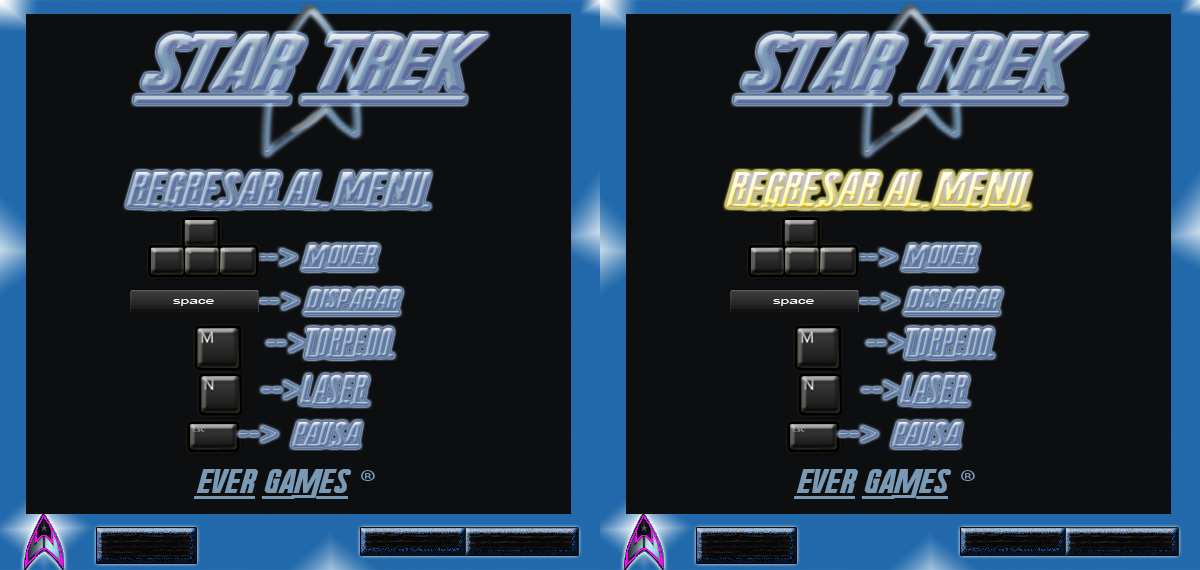
<style>
.page{position:relative;width:1200px;height:570px;background:#0d0e0f}
.page>*{position:absolute;margin:0}
.t1{font:79.1px "RadiumCorp";scale:1.34 1}
.t2{font:40.7px "RadiumCorp";scale:1.23 1}
.t3{font:28.4px "RadiumCorp";scale:1.23 1}
.t4{font:28.4px "MyriadPro-Regular";scale:1.23 1}
.t5{font:9.2px "ArialMT";color:#fafcfe;scale:1.69 1}
.t6{font:33.4px "RadiumCorp"}
.t7{font:33.4px "MyriadPro-Regular"}
.t8{font:34.3px "RadiumCorp"}
.t9{font:34.3px "MyriadPro-Regular"}
.t10{font:33.1px "RadiumCorp";color:#7a99b4;scale:1.25 1}
.t11{font:33.1px "MyriadPro-Regular";color:#7a99b4;scale:1.25 1}
</style>
<div class="page">
<p class="t1" style="left:134px;top:34px;width:354px;height:70px">star trek</p>
<p class="t1" style="left:734px;top:34px;width:354px;height:70px">star trek</p>
<p class="t2" style="left:126px;top:172px;width:305px;height:36px">REGRESAR AL MENU</p>
<p class="t2" style="left:726px;top:172px;width:305px;height:36px">REGRESAR AL MENU</p>
<p class="t3" style="left:258px;top:245px;width:121px;height:25px"><span class="t4">--&gt; </span>mover</p>
<p class="t3" style="left:858px;top:245px;width:121px;height:25px"><span class="t4">--&gt; </span>mover</p>
<p class="t3" style="left:260px;top:289px;width:142px;height:25px"><span class="t4">--&gt; </span>disparar</p>
<p class="t3" style="left:860px;top:289px;width:142px;height:25px"><span class="t4">--&gt; </span>disparar</p>
<p class="t5" style="left:173px;top:299px;width:41px;height:7px">space</p>
<p class="t5" style="left:773px;top:299px;width:41px;height:7px">space</p>
<p class="t6" style="left:267px;top:328px;width:127px;height:30px"><span class="t7">--&gt;</span>TORPEDO</p>
<p class="t6" style="left:867px;top:328px;width:127px;height:30px"><span class="t7">--&gt;</span>TORPEDO</p>
<p class="t8" style="left:262px;top:375px;width:107px;height:30px"><span class="t9">--&gt;</span>LASER</p>
<p class="t8" style="left:862px;top:375px;width:107px;height:30px"><span class="t9">--&gt;</span>LASER</p>
<p class="t3" style="left:239px;top:422px;width:123px;height:25px"><span class="t4">--&gt;  </span>PAUSa</p>
<p class="t3" style="left:839px;top:422px;width:123px;height:25px"><span class="t4">--&gt;  </span>PAUSa</p>
<p class="t10" style="left:194px;top:469px;width:181px;height:30px">ever games <span class="t11">®</span></p>
<p class="t10" style="left:794px;top:469px;width:181px;height:30px">ever games <span class="t11">®</span></p>
</div>
